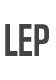
<style>
.page{position:relative;width:56px;height:80px;background:#ffffff}
.page>*{position:absolute;margin:0}
.t1{font:43.8px "WWF";letter-spacing:-0.025em;color:#444444;font-weight:bold}
</style>
<div class="page">
<p class="t1" style="left:5px;top:24px;width:44px;height:32px">LEP</p>
</div>
